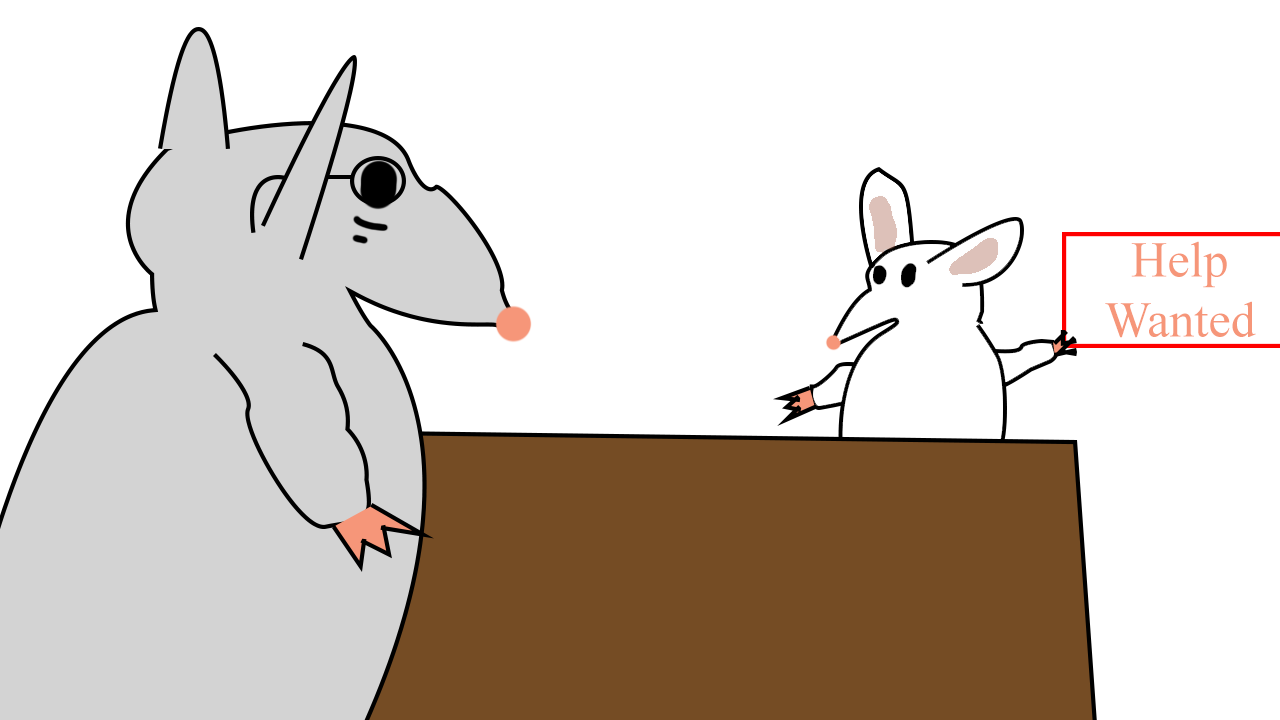
<style>
.page{position:relative;width:1280px;height:720px;background:#ffffff}
.page>*{position:absolute;margin:0}
.t1{font:50px "TimesNewRomanPSMT";color:#f69679}
</style>
<div class="page">
<p class="t1" style="left:1105px;top:241px;width:151px;height:97px;text-align:center">Help<br>Wanted</p>
</div>
